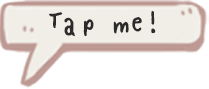
<style>
.page{position:relative;width:209px;height:89px;background:#ffffff}
.page>*{position:absolute;margin:0}
.t1{font:32.9px "maki_maruhand";color:#2b2b2b}
</style>
<div class="page">
<p class="t1" style="left:49px;top:11px;width:107px;height:26px">Tap me!</p>
</div>
